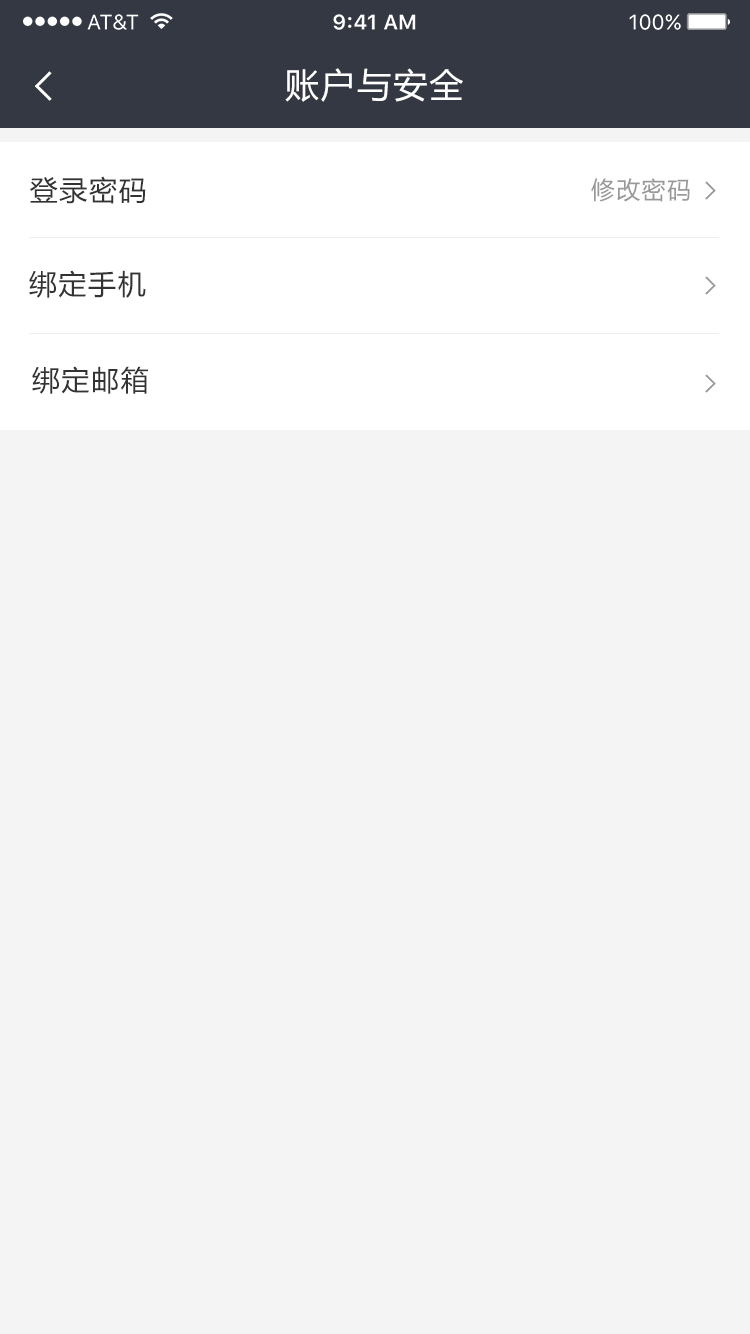
<style>
.page{position:relative;width:750px;height:1334px;background:#f4f4f4}
.page>*{position:absolute;margin:0}
.t1{font:34px "MicrosoftYaHei";letter-spacing:0.06em;color:#ffffff}
.t2{font:28px "MicrosoftYaHei";letter-spacing:0.06em;color:#333333}
.t3{font:24px "MicrosoftYaHei";letter-spacing:0.06em;color:#999999}
</style>
<div class="page">
<p class="t1" style="left:285px;top:68px;width:178px;height:34px">账户与安全</p>
<p class="t2" style="left:30px;top:176px;width:116px;height:28px">登录密码</p>
<p class="t3" style="left:591px;top:178px;width:99px;height:24px">修改密码</p>
<p class="t2" style="left:29px;top:270px;width:117px;height:28px">绑定手机</p>
<p class="t2" style="left:32px;top:366px;width:116px;height:28px">绑定邮箱</p>
</div>
